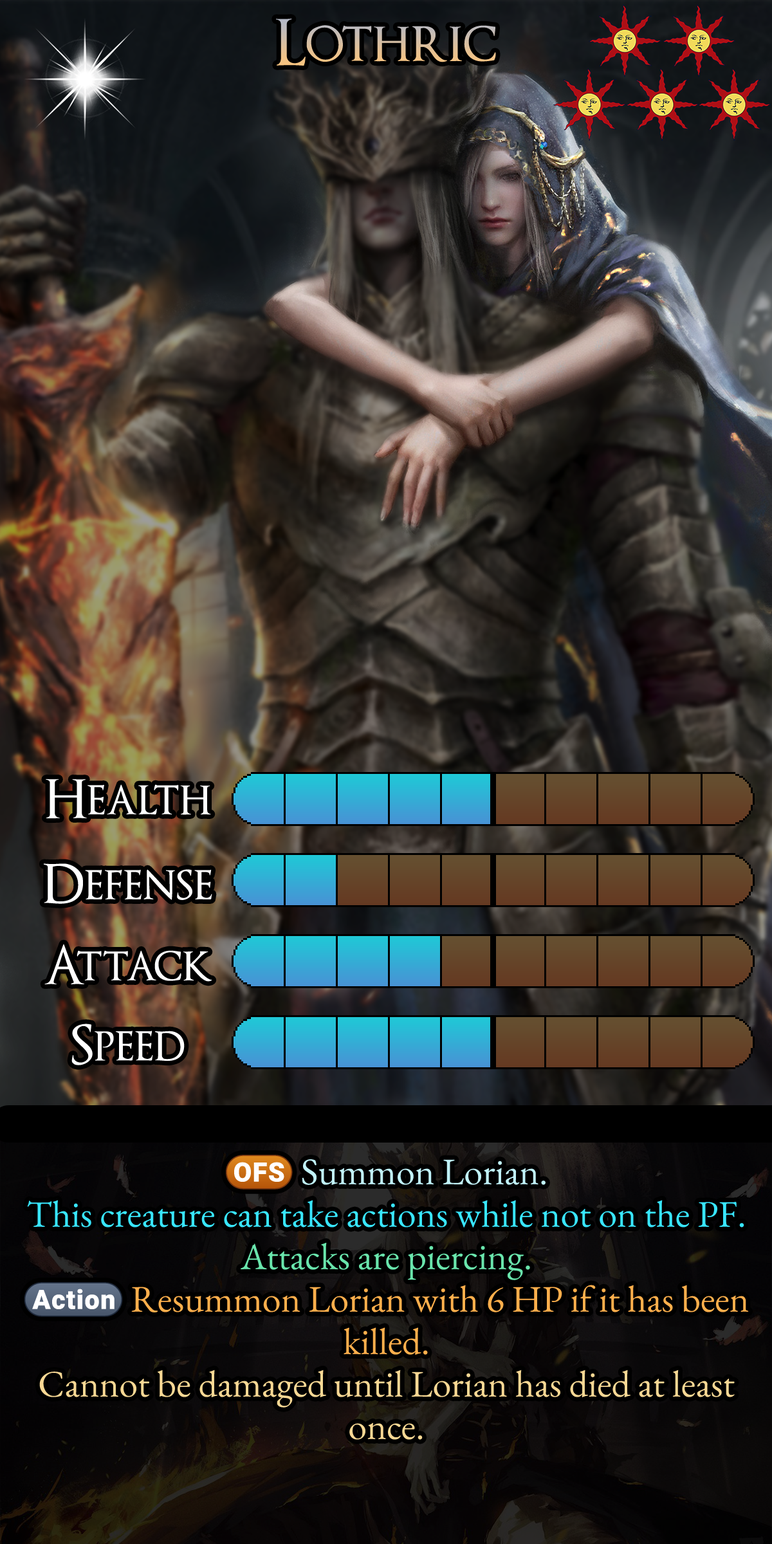
<style>
.page{position:relative;width:772px;height:1544px}
.page>*{position:absolute;margin:0}
.t1{font:108.1px "OptimusPrinceps"}
.t2{font:90.7px "OptimusPrinceps";color:#ffffff}
.t3{font:64.3px/42.5px "EBGaramond-Regular";color:#f8d894}
.t4{font:35.1px/42.5px "stoogedings-Regular";color:#c1f3fa}
.t5{font:64.3px/42.5px "EBGaramond-Regular";color:#c1f3fa}
.t6{font:64.3px/42.5px "EBGaramond-Regular";color:#38e6ff}
.t7{font:64.3px/42.5px "EBGaramond-Regular";color:#69e5ac}
.t8{font:60.2px/42.5px "stoogedings-Regular";color:#ffaf4c}
.t9{font:64.3px/42.5px "EBGaramond-Regular";color:#ffaf4c}
</style>
<div class="page">
<p class="t1" style="left:276px;top:19px;width:220px;height:47px">Lothric</p>
<p class="t2" style="left:46px;top:779px;width:165px;height:39px">Health</p>
<p class="t2" style="left:43px;top:864px;width:169px;height:40px">Defense</p>
<p class="t2" style="left:44px;top:944px;width:168px;height:41px">Attack</p>
<p class="t2" style="left:71px;top:1024px;width:114px;height:42px">Speed</p>
<p class="t3" style="left:24px;top:1155px;width:725px;height:285px;text-align:center"><span class="t4">(OFS)</span><span class="t5"> Summon Lorian.<br></span><span class="t6">This creature can take actions while not on the PF.<br></span><span class="t7">Attacks are piercing.<br></span><span class="t8">(Action)</span><span class="t9"> Resummon Lorian with 6 HP if it has been killed.<br></span>Cannot be damaged until Lorian has died at least once.</p>
</div>
